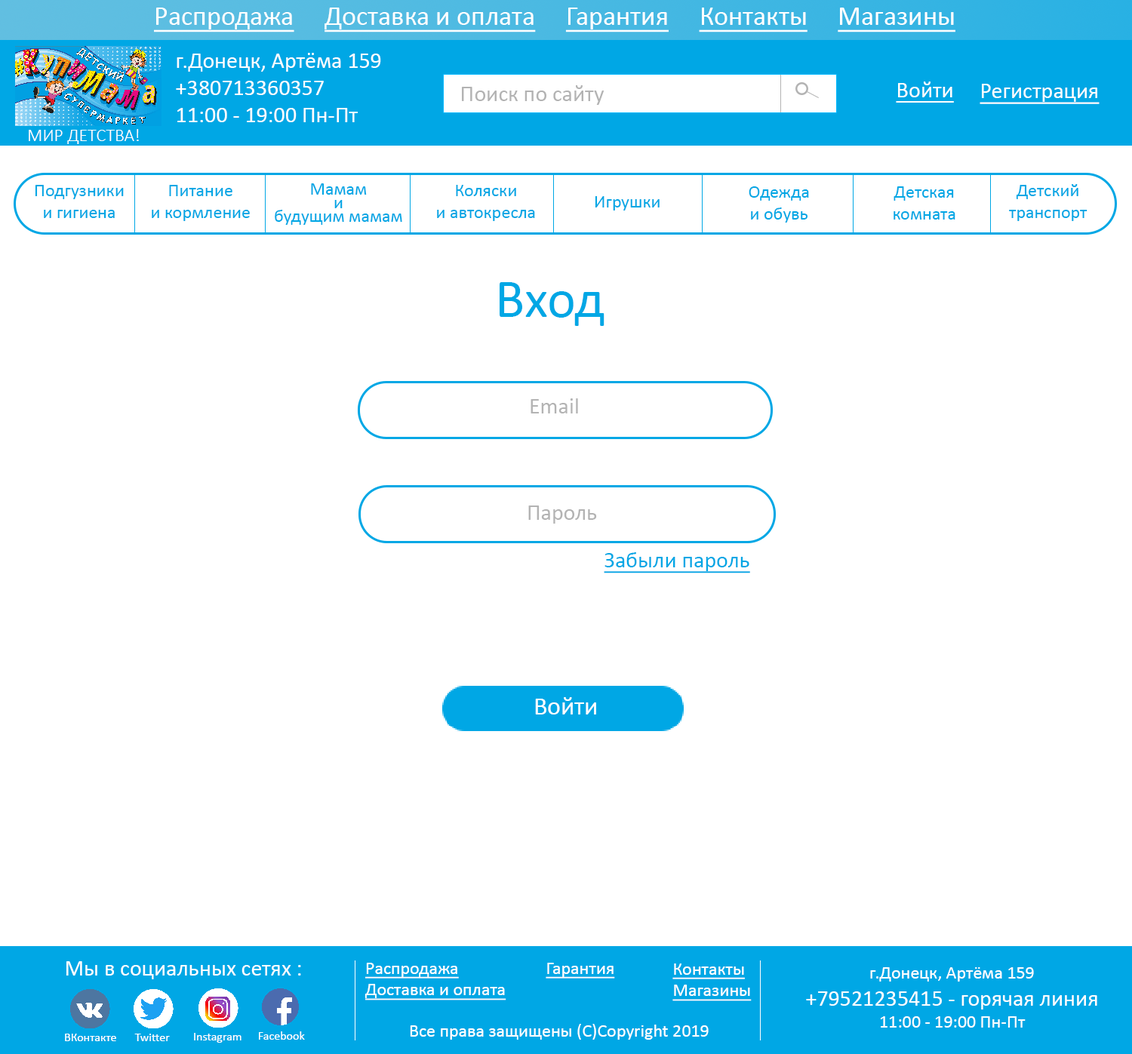
<style>
.page{position:relative;width:1132px;height:1054px;background:#ffffff}
.page>*{position:absolute;margin:0}
.t1{font:27.2px "Calibri";color:#ffffff;text-decoration:underline}
.t2{font:22.6px "Calibri";color:#ffffff}
.t3{font:22.6px "Calibri";color:#b3b3b3}
.t4{font:22.6px "Calibri";color:#ffffff;text-decoration:underline}
.t5{font:18.1px "Calibri-Light";color:#ffffff}
.t6{font:18.1px "Calibri";color:#00a7e5}
.t7{font:18.1px/13.6px "Calibri";color:#00a7e5}
.t8{font:54.3px "Calibri";color:#00a7e5}
.t9{font:22.6px "Calibri";color:#00a7e5;text-decoration:underline}
.t10{font:25.3px "Calibri";color:#ffffff}
.t11{font:18.1px "Calibri";color:#ffffff;text-decoration:underline}
.t12{font:18.1px "Calibri";color:#ffffff}
.t13{font:12.1px "Calibri";color:#ffffff}
</style>
<div class="page">
<p class="t1" style="left:154px;top:8px;width:801px;height:24px">Распродажа     Доставка и оплата     Гарантия     Контакты     Магазины</p>
<p class="t2" style="left:176px;top:53px;width:205px;height:69px">г.Донецк, Артёма 159<br>+380713360357<br>11:00 - 19:00 Пн-Пт</p>
<p class="t3" style="left:462px;top:85px;width:141px;height:20px">Поиск по сайту</p>
<p class="t4" style="left:895px;top:81px;width:58px;height:22px">Войти</p>
<p class="t4" style="left:979px;top:84px;width:120px;height:20px">Регистрация</p>
<p class="t5" style="left:29px;top:129px;width:110px;height:15px">МИР ДЕТСТВА!</p>
<p class="t6" style="left:35px;top:185px;width:89px;height:33px;text-align:center">Подгузники<br>и гигиена</p>
<p class="t6" style="left:152px;top:185px;width:98px;height:36px;text-align:center">Питание <br>и кормление</p>
<p class="t7" style="left:275px;top:183px;width:127px;height:42px;text-align:center">Мамам<br>и <br>будущим мамам</p>
<p class="t6" style="left:437px;top:185px;width:98px;height:36px;text-align:center">Коляски<br>и автокресла</p>
<p class="t6" style="left:1009px;top:184px;width:78px;height:37px;text-align:center">Детский<br>транспорт</p>
<p class="t6" style="left:594px;top:196px;width:65px;height:14px">Игрушки</p>
<p class="t6" style="left:748px;top:186px;width:61px;height:37px;text-align:center">Одежда<br>и обувь</p>
<p class="t6" style="left:893px;top:186px;width:62px;height:34px;text-align:center">Детская<br>комната</p>
<p class="t8" style="left:499px;top:282px;width:105px;height:44px">Вход</p>
<p class="t3" style="left:530px;top:398px;width:48px;height:15px">Email</p>
<p class="t3" style="left:528px;top:505px;width:69px;height:19px">Пароль</p>
<p class="t9" style="left:603px;top:552px;width:147px;height:21px">Забыли пароль</p>
<p class="t10" style="left:535px;top:697px;width:61px;height:17px">Войти</p>
<p class="t2" style="left:66px;top:961px;width:235px;height:18px">Мы в социальных сетях :</p>
<p class="t11" style="left:364px;top:963px;width:142px;height:37px">Распродажа<br>Доставка и оплата</p>
<p class="t11" style="left:545px;top:963px;width:70px;height:15px">Гарантия</p>
<p class="t11" style="left:672px;top:963px;width:79px;height:38px">Контакты<br>Магазины</p>
<p class="t2" style="left:806px;top:967px;width:291px;height:60px;text-align:center"><span class="t12">г.Донецк, Артёма 159<br></span>+79521235415 - горячая линия<br><span class="t12">11:00 - 19:00 Пн-Пт</span></p>
<p class="t12" style="left:410px;top:1024px;width:298px;height:15px">Все права защищены (С)Copyright 2019</p>
<p class="t13" style="left:65px;top:1033px;width:51px;height:8px">ВКонтакте</p>
<p class="t13" style="left:134px;top:1033px;width:36px;height:8px">Twitter</p>
<p class="t13" style="left:194px;top:1033px;width:47px;height:10px">Instagram</p>
<p class="t13" style="left:259px;top:1031px;width:46px;height:8px">Facebook</p>
</div>
